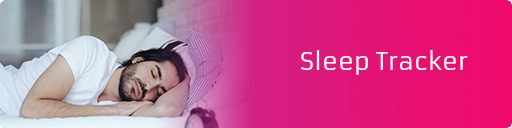
<style>
.page{position:relative;width:512px;height:128px}
.page>*{position:absolute;margin:0}
.t1{font:24px "Armata-Regular";color:#ffffff}
</style>
<div class="page">
<p class="t1" style="left:301px;top:50px;width:167px;height:25px">Sleep Tracker</p>
</div>
